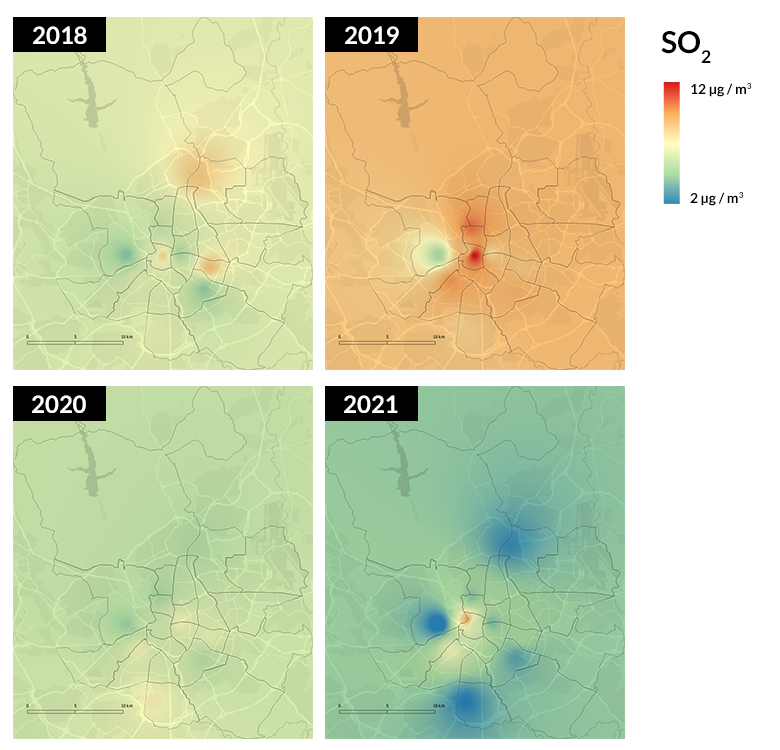
<style>
.page{position:relative;width:780px;height:750px;background:#ffffff}
.page>*{position:absolute;margin:0}
.t1{font:24px "Lato-Bold";color:#ffffff}
.t2{font:30px "Lato-Bold";color:#000000}
.t3{font:14px "Lato-Bold";color:#000000}
</style>
<div class="page">
<p class="t1" style="left:33px;top:26px;width:54px;height:18px">2018</p>
<p class="t1" style="left:345px;top:26px;width:54px;height:18px">2019</p>
<p class="t2" style="left:661px;top:31px;width:50px;height:32px">SO2</p>
<p class="t3" style="left:691px;top:83px;width:61px;height:14px">12 μg / m3</p>
<p class="t3" style="left:690px;top:192px;width:54px;height:14px">2 μg / m3</p>
<p class="t1" style="left:32px;top:395px;width:54px;height:18px">2020</p>
<p class="t1" style="left:344px;top:395px;width:54px;height:18px">2021</p>
</div>
